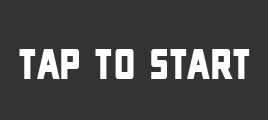
<style>
.page{position:relative;width:268px;height:120px;background:#333333}
.page>*{position:absolute;margin:0}
.t1{font:67.2px "ONRAMP";color:#ffffff;font-weight:bold;scale:0.7 1}
</style>
<div class="page">
<p class="t1" style="left:19px;top:49px;width:231px;height:30px">tap to start</p>
</div>
